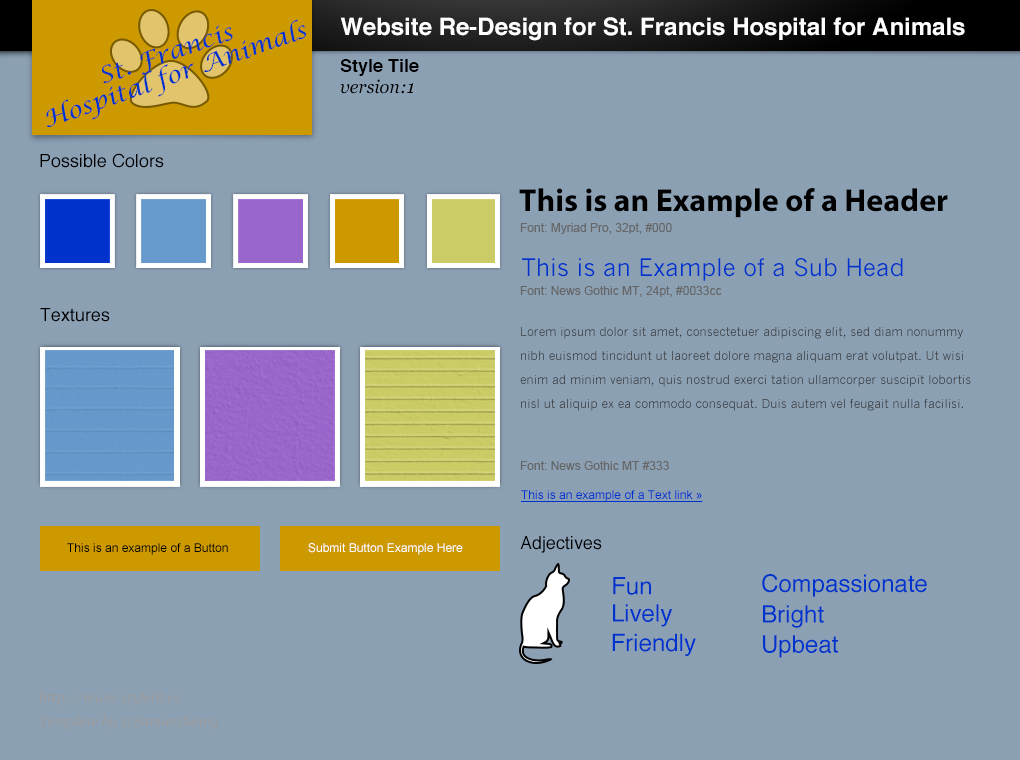
<style>
.page{position:relative;width:1020px;height:760px;background:#8ca0b4}
.page>*{position:absolute;margin:0}
.t1{font:24px "Helvetica-Bold";color:#ffffff}
.t2{font:22.9px/22.9px "LucidaCalligraphy-Italic";color:#0033cc;scale:1.07 1}
.t3{font:18px "Helvetica-Bold";color:#000000}
.t4{font:18px "Georgia-Italic";color:#000000}
.t5{font:18px "Helvetica";color:#000000}
.t6{font:32px "MyriadPro-Bold";color:#000000}
.t7{font:12px "ArialMT";color:#666666}
.t8{font:24px "NewsGothicMT";color:#0033cc}
.t9{font:12px/24px "NewsGothicMT";color:#333333}
.t10{font:12px "ArialMT";color:#0033cc;text-decoration:underline}
.t11{font:12px "ArialMT";color:#000000}
.t12{font:12px "ArialMT";color:#ffffff}
.t13{font:24px "Helvetica";color:#0033cc}
.t14{font:14px/24px "Georgia-Italic";color:#999999}
</style>
<div class="page">
<p class="t1" style="left:340px;top:17px;width:625px;height:24px">Website Re-Design for St. Francis Hospital for Animals</p>
<p class="t2" style="left:46px;top:19px;width:260px;height:108px;text-align:center;rotate:-19deg">St. Francis<br>Hospital for Animals</p>
<p class="t3" style="left:340px;top:59px;width:79px;height:17px">Style Tile</p>
<p class="t4" style="left:340px;top:79px;width:74px;height:15px">version:1</p>
<p class="t5" style="left:40px;top:153px;width:124px;height:15px">Possible Colors</p>
<p class="t6" style="left:519px;top:188px;width:429px;height:30px">This is an Example of a Header</p>
<p class="t7" style="left:520px;top:223px;width:152px;height:11px">Font: Myriad Pro, 32pt, #000</p>
<p class="t8" style="left:522px;top:258px;width:381px;height:23px">This is an Example of a Sub Head</p>
<p class="t7" style="left:520px;top:286px;width:202px;height:11px">Font: News Gothic MT, 24pt, #0033cc</p>
<p class="t5" style="left:40px;top:308px;width:70px;height:14px">Textures</p>
<p class="t9" style="left:520px;top:327px;width:451px;height:84px">Lorem ipsum dolor sit amet, consectetuer adipiscing elit, sed diam nonummy nibh euismod tincidunt ut laoreet dolore magna aliquam erat volutpat. Ut wisi enim ad minim veniam, quis nostrud exerci tation ullamcorper suscipit lobortis nisl ut aliquip ex ea commodo consequat. Duis autem vel feugait nulla facilisi.</p>
<p class="t7" style="left:520px;top:461px;width:149px;height:9px">Font: News Gothic MT #333</p>
<p class="t10" style="left:521px;top:490px;width:182px;height:12px">This is an example of a Text link »</p>
<p class="t11" style="left:67px;top:543px;width:161px;height:12px">This is an example of a Button</p>
<p class="t12" style="left:308px;top:543px;width:155px;height:12px">Submit Button Example Here</p>
<p class="t5" style="left:520px;top:536px;width:82px;height:17px">Adjectives</p>
<p class="t13" style="left:613px;top:577px;width:38px;height:18px">Fun</p>
<p class="t13" style="left:762px;top:574px;width:165px;height:23px">Compassionate</p>
<p class="t13" style="left:613px;top:604px;width:59px;height:23px">Lively</p>
<p class="t13" style="left:763px;top:605px;width:61px;height:23px">Bright</p>
<p class="t13" style="left:612px;top:633px;width:84px;height:23px">Friendly</p>
<p class="t13" style="left:763px;top:635px;width:75px;height:23px">Upbeat</p>
<p class="t14" style="left:39px;top:691px;width:180px;height:38px">http://www.styletil.es<br>Template by @Samanthatoy</p>
</div>
